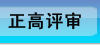
<style>
.page{position:relative;width:100px;height:45px}
.page>*{position:absolute;margin:0}
.t1{font:18px "SimHei";letter-spacing:0.04em;color:#040404;font-weight:bold}
</style>
<div class="page">
<p class="t1" style="left:8px;top:12px;width:73px;height:18px">正高评审</p>
</div>
